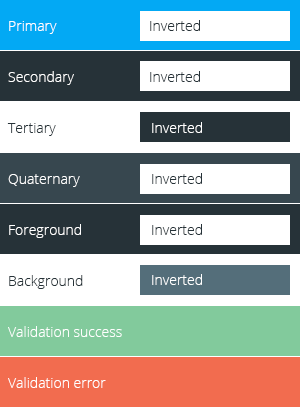
<style>
.page{position:relative;width:300px;height:407px;background:#ffffff}
.page>*{position:absolute;margin:0}
.t1{font:14px "OpenSans-Light";color:#ffffff}
.t2{font:14px "OpenSans-Light";color:#263238}
</style>
<div class="page">
<p class="t1" style="left:9px;top:21px;width:48px;height:13px">Primary</p>
<p class="t2" style="left:150px;top:20px;width:50px;height:11px">Inverted</p>
<p class="t1" style="left:8px;top:71px;width:66px;height:14px">Secondary</p>
<p class="t2" style="left:150px;top:71px;width:50px;height:11px">Inverted</p>
<p class="t2" style="left:7px;top:123px;width:49px;height:13px">Tertiary</p>
<p class="t1" style="left:152px;top:122px;width:50px;height:11px">Inverted</p>
<p class="t1" style="left:8px;top:174px;width:72px;height:13px">Quaternary</p>
<p class="t2" style="left:152px;top:173px;width:50px;height:11px">Inverted</p>
<p class="t1" style="left:9px;top:224px;width:72px;height:14px">Foreground</p>
<p class="t2" style="left:152px;top:224px;width:50px;height:11px">Inverted</p>
<p class="t2" style="left:9px;top:275px;width:74px;height:14px">Background</p>
<p class="t1" style="left:152px;top:274px;width:50px;height:11px">Inverted</p>
<p class="t1" style="left:8px;top:326px;width:114px;height:11px">Validation success</p>
<p class="t1" style="left:8px;top:377px;width:98px;height:11px">Validation error</p>
</div>
